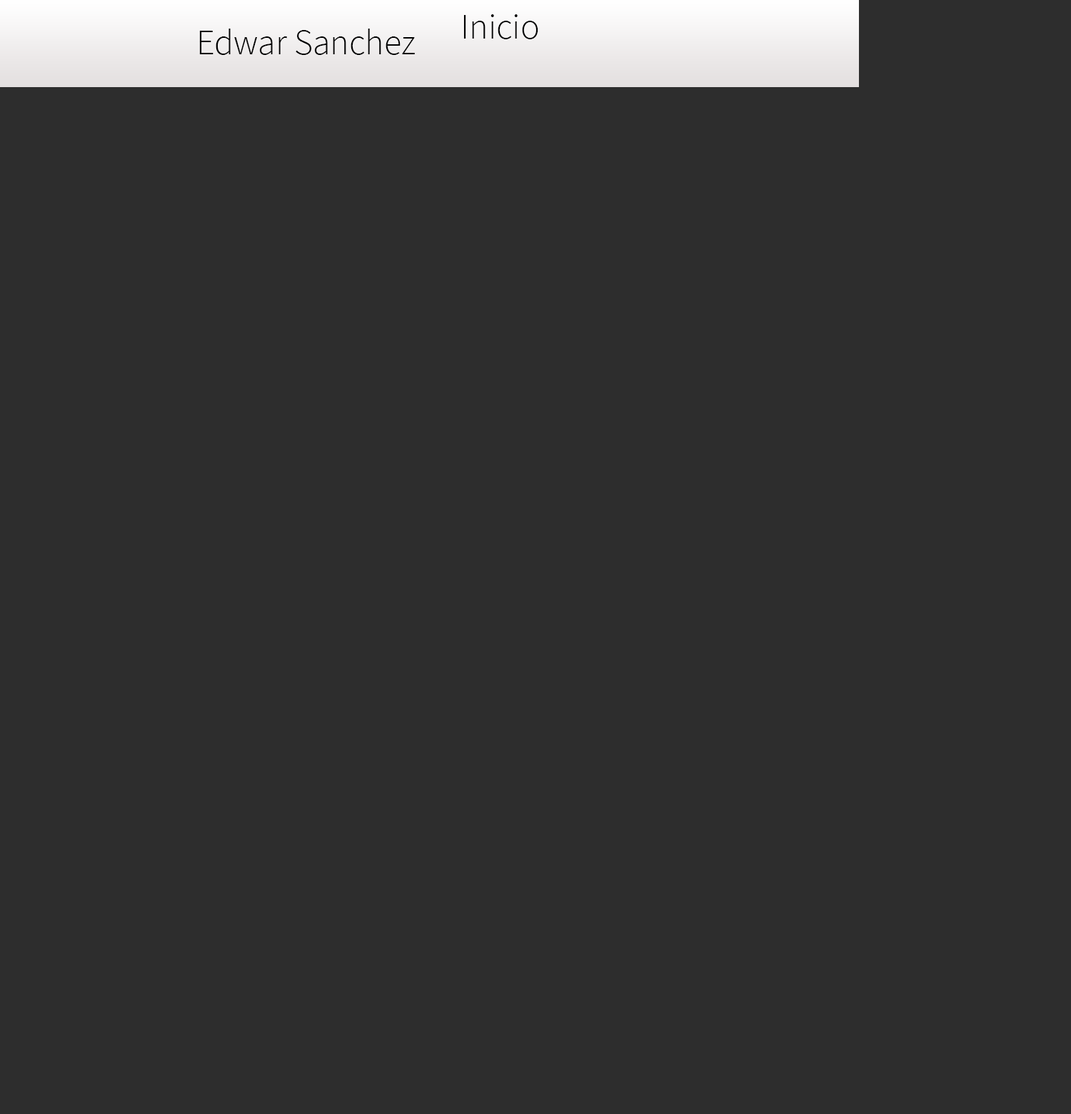
<style>
.page{position:relative;width:1071px;height:1114px;background:#2d2d2d}
.page>*{position:absolute;margin:0}
.t1{font:35.7px "SourceSansPro-Light";color:#000000}
</style>
<div class="page">
<p class="t1" style="left:463px;top:14px;width:75px;height:25px">Inicio</p>
<p class="t1" style="left:199px;top:29px;width:216px;height:26px">Edwar Sanchez</p>
</div>
